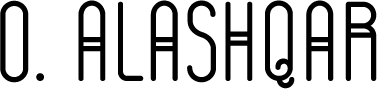
<style>
.page{position:relative;width:377px;height:89px;background:#ffffff}
.page>*{position:absolute;margin:0}
.t1{font:112.8px "GOGOIA-Deco";letter-spacing:-0.015em;color:#000000}
</style>
<div class="page">
<p class="t1" style="left:0px;top:0px;width:377px;height:89px">O. Alashqar</p>
</div>
